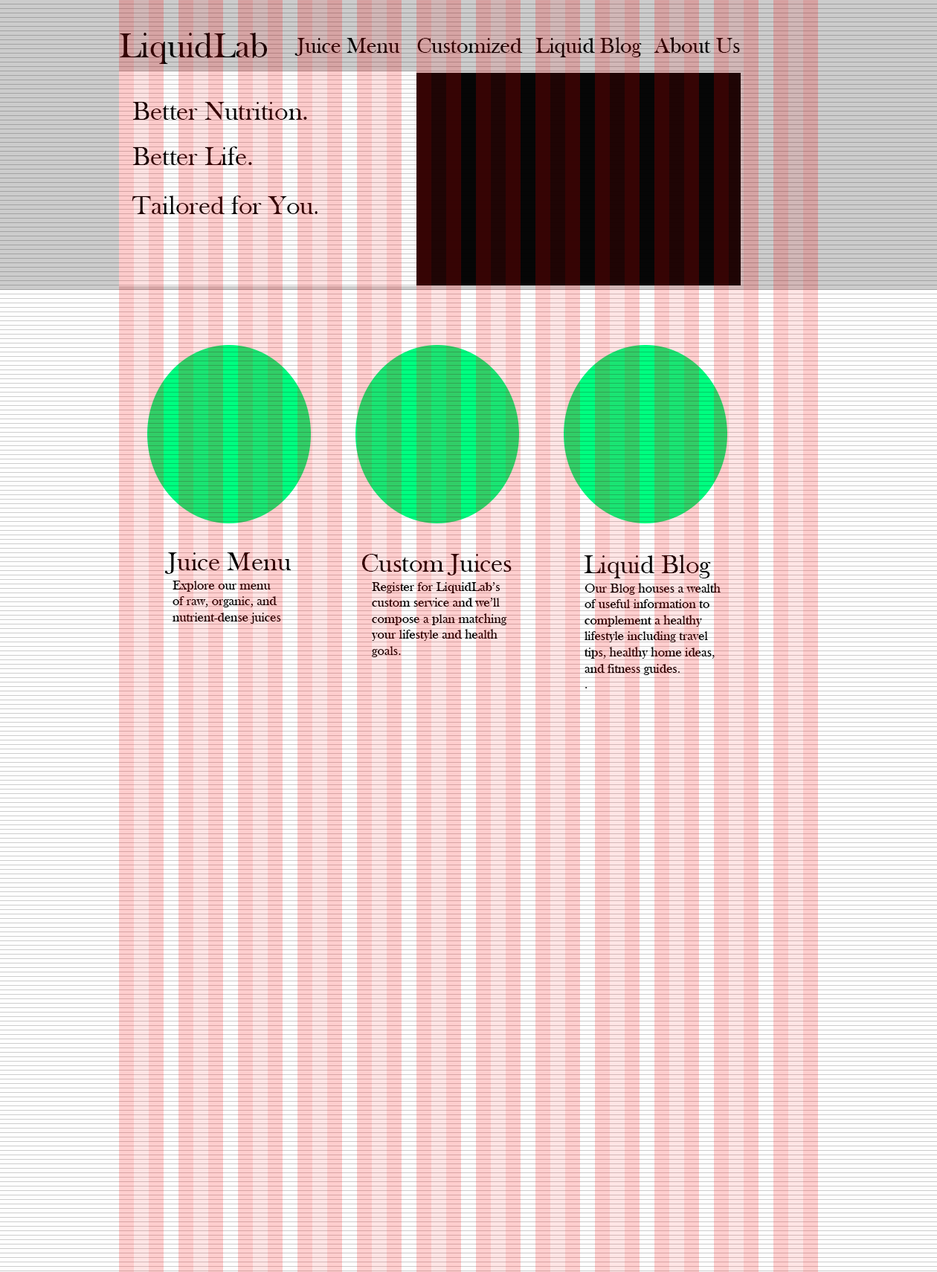
<style>
.page{position:relative;width:937px;height:1272px}
.page>*{position:absolute;margin:0}
.t1{font:35.7px "BaskOldFace"}
.t2{font:22.3px "BaskOldFace"}
.t3{font:26.8px "BaskOldFace"}
.t4{font:13.4px "BaskOldFace"}
</style>
<div class="page">
<p class="t1" style="left:120px;top:33px;width:147px;height:31px">LiquidLab</p>
<p class="t2" style="left:295px;top:38px;width:105px;height:18px">Juice Menu</p>
<p class="t2" style="left:417px;top:38px;width:106px;height:15px">Customized</p>
<p class="t2" style="left:535px;top:37px;width:107px;height:20px">Liquid Blog</p>
<p class="t2" style="left:654px;top:37px;width:86px;height:16px">About Us</p>
<p class="t3" style="left:132px;top:102px;width:175px;height:18px">Better Nutrition.</p>
<p class="t3" style="left:132px;top:147px;width:120px;height:18px">Better Life.</p>
<p class="t3" style="left:132px;top:196px;width:186px;height:18px">Tailored for You<span class="t2">.</span></p>
<p class="t3" style="left:164px;top:553px;width:128px;height:21px">Juice Menu</p>
<p class="t3" style="left:362px;top:554px;width:150px;height:22px">Custom Juices</p>
<p class="t3" style="left:584px;top:555px;width:127px;height:24px">Liquid Blog</p>
<p class="t4" style="left:173px;top:581px;width:108px;height:43px">Explore our menu <br>of raw, organic, and<br>nutrient-dense juices</p>
<p class="t4" style="left:371px;top:582px;width:136px;height:75px">Register for LiquidLab’s<br>custom service and we’ll <br>compose a plan matching<br>your lifestyle and health<br>goals.</p>
<p class="t4" style="left:585px;top:583px;width:136px;height:106px">Our Blog houses a wealth<br>of useful information to<br>complement a healthy<br>lifestyle including travel<br>tips, healthy home ideas,<br>and fitness guides. <br>.</p>
</div>
